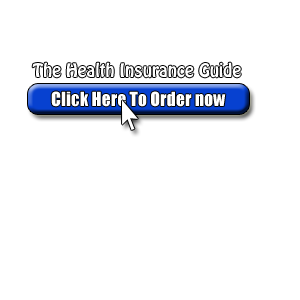
<style>
.page{position:relative;width:300px;height:300px;background:#ffffff}
.page>*{position:absolute;margin:0}
.t1{font:16.7px "Hobo";color:#ffffff}
.t2{font:18px "Impact";color:#ffffff}
</style>
<div class="page">
<p class="t1" style="left:32px;top:62px;width:209px;height:16px">The Health Insurance Guide</p>
<p class="t2" style="left:51px;top:91px;width:175px;height:16px">Click Here To Order now</p>
</div>
